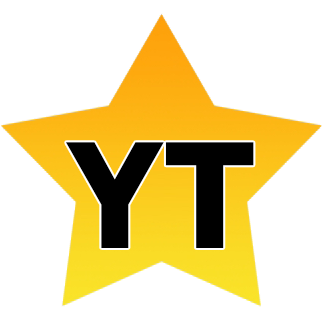
<style>
.page{position:relative;width:322px;height:321px;background:#ffffff}
.page>*{position:absolute;margin:0}
.t1{font:151.3px "Matter-Heavy";color:#000000}
</style>
<div class="page">
<p class="t1" style="left:66px;top:142px;width:188px;height:106px">YT</p>
</div>
